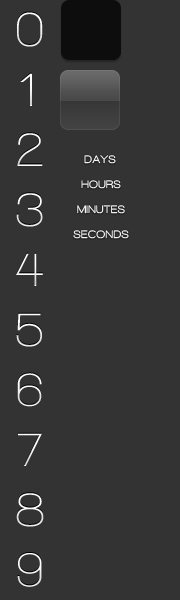
<style>
.page{position:relative;width:180px;height:600px;background:#333333}
.page>*{position:absolute;margin:0}
.t1{font:50px "WalkwaySemiBold";letter-spacing:0.1em}
.t2{font:11px "WalkwayUltraBold";letter-spacing:0.1em;color:#ffffff}
.t3{font:11px "WalkwayUltraBold";letter-spacing:0.1em}
</style>
<div class="page">
<p class="t1" style="left:17px;top:11px;width:26px;height:35px">0</p>
<p class="t1" style="left:20px;top:72px;width:12px;height:33px">1</p>
<p class="t1" style="left:17px;top:132px;width:26px;height:33px">2</p>
<p class="t2" style="left:84px;top:155px;width:32px;height:9px">DAYS</p>
<p class="t2" style="left:81px;top:180px;width:40px;height:9px">HOURS</p>
<p class="t1" style="left:16px;top:192px;width:27px;height:34px">3</p>
<p class="t3" style="left:77px;top:205px;width:48px;height:9px">MINUTES</p>
<p class="t3" style="left:73px;top:230px;width:56px;height:9px">SECONDS</p>
<p class="t1" style="left:16px;top:252px;width:27px;height:33px">4</p>
<p class="t1" style="left:16px;top:312px;width:26px;height:34px">5</p>
<p class="t1" style="left:17px;top:372px;width:25px;height:34px">6</p>
<p class="t1" style="left:18px;top:432px;width:24px;height:33px">7</p>
<p class="t1" style="left:16px;top:492px;width:28px;height:34px">8</p>
<p class="t1" style="left:17px;top:552px;width:25px;height:34px">9</p>
</div>
